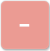
<style>
.page{position:relative;width:50px;height:51px;background:#eb9b93}
.page>*{position:absolute;margin:0}
.t1{font:30.3px "Hasteristico-Bold";letter-spacing:0.05em;color:#ffffff;font-weight:bold}
</style>
<div class="page">
<p class="t1" style="left:19px;top:24px;width:11px;height:3px">-</p>
</div>
